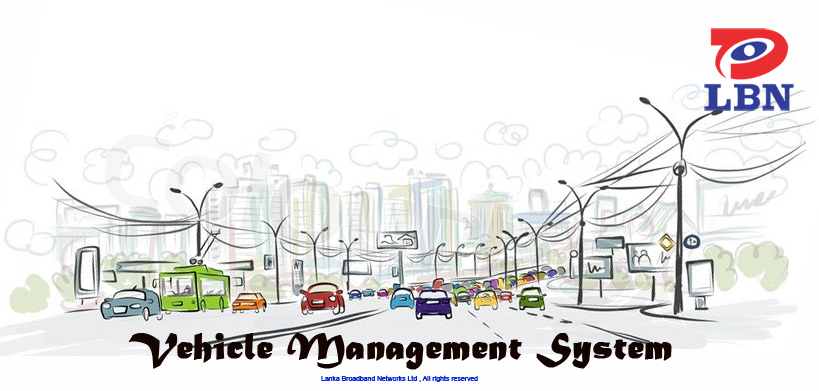
<style>
.page{position:relative;width:819px;height:391px;background:#ffffff}
.page>*{position:absolute;margin:0}
.t1{font:39px "MaturaMTScriptCapitals";color:#130301;font-weight:bold}
.t2{font:6.5px "ArialMT";color:#0627d1;font-weight:bold}
</style>
<div class="page">
<p class="t1" style="left:129px;top:333px;width:543px;height:37px">Vehicle Management System</p>
<p class="t2" style="left:321px;top:375px;width:157px;height:7px">Lanka Broadband Networks Ltd , All rights reserved</p>
</div>
